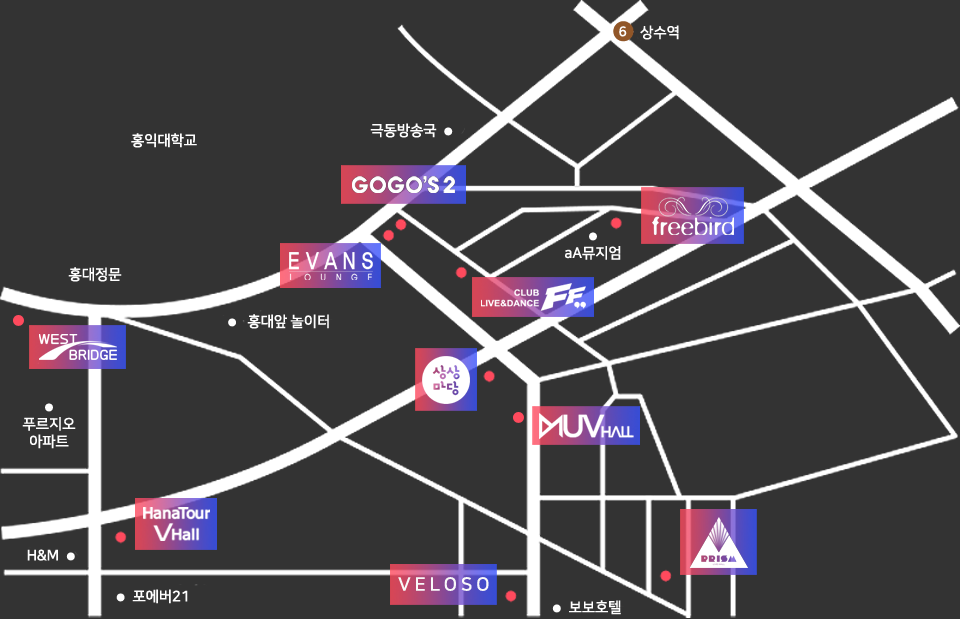
<style>
.page{position:relative;width:960px;height:619px;background:#333333}
.page>*{position:absolute;margin:0}
.t1{font:13.3px "NanumSquareB";letter-spacing:-0.01em;color:#fefefe}
.t2{font:14.7px "NanumSquareB";letter-spacing:-0.01em;color:#fefefe}
.t3{font:10.7px "NanumSquareB";letter-spacing:-0.01em;color:#fefefe}
.t4{font:10.7px/18.7px "NanumSquareB";letter-spacing:-0.01em;color:#fefefe}
.t5{font:18.4px "NanumSquareB";letter-spacing:0.2em;color:#f9f9f9}
</style>
<div class="page">
<p class="t1" style="left:619px;top:26px;width:8px;height:11px">6</p>
<p class="t2" style="left:640px;top:25px;width:39px;height:15px">상수역</p>
<p class="t2" style="left:370px;top:123px;width:83px;height:15px">극동방송국  <span class="t3">●</span></p>
<p class="t2" style="left:131px;top:133px;width:66px;height:15px">홍익대학교</p>
<p class="t2" style="left:565px;top:232px;width:56px;height:28px;text-align:center"><span class="t3">● <br></span>aA뮤지엄</p>
<p class="t2" style="left:68px;top:267px;width:54px;height:15px">홍대정문</p>
<p class="t2" style="left:228px;top:314px;width:101px;height:15px"><span class="t3">●   </span>홍대앞 놀이터</p>
<p class="t2" style="left:22px;top:403px;width:54px;height:46px;text-align:center"><span class="t4">●<br></span>푸르지오<br>아파트</p>
<p class="t2" style="left:27px;top:549px;width:48px;height:12px">H&amp;M  <span class="t3">●</span></p>
<p class="t5" style="left:398px;top:577px;width:91px;height:14px">VELOSO</p>
<p class="t2" style="left:116px;top:589px;width:72px;height:15px"><span class="t3">●  </span>포에버21</p>
<p class="t2" style="left:552px;top:600px;width:69px;height:15px"><span class="t3">●  </span>보보호텔</p>
</div>
